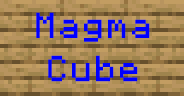
<style>
.page{position:relative;width:184px;height:96px}
.page>*{position:absolute;margin:0}
.t1{font:36px "Minecraft-Regular";letter-spacing:0.1em;color:#0000ff;scale:0.95 1}
</style>
<div class="page">
<p class="t1" style="left:36px;top:12px;width:114px;height:70px;text-align:center">Magma<br>Cube</p>
</div>
